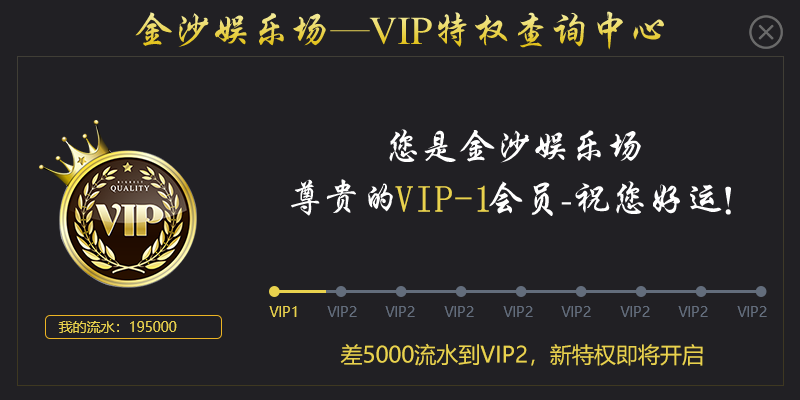
<style>
.page{position:relative;width:800px;height:400px;background:#212024}
.page>*{position:absolute;margin:0}
.t1{font:39.3px "CTXingKaiSJ"}
.t2{font:37.3px "CTXingKaiSJ";color:#ffffff}
.t3{font:37.3px "SimSun";color:#e9d24e;font-weight:bold}
.t4{font:14px "MicrosoftYaHei";color:#e9d24e}
.t5{font:14px "MicrosoftYaHei";color:#636d7c}
.t6{font:22px "MicrosoftYaHei";color:#e9d24e}
</style>
<div class="page">
<p class="t1" style="left:135px;top:11px;width:529px;height:39px">金沙娱乐场—VIP特权查询中心</p>
<p class="t2" style="left:389px;top:129px;width:252px;height:34px">您是金沙娱乐场</p>
<p class="t2" style="left:291px;top:179px;width:102px;height:37px">尊贵的</p>
<p class="t3" style="left:395px;top:185px;width:94px;height:27px">VIP-1</p>
<p class="t2" style="left:489px;top:181px;width:242px;height:35px">会员-祝您好运！</p>
<p class="t4" style="left:269px;top:306px;width:28px;height:11px">VIP1</p>
<p class="t5" style="left:327px;top:306px;width:30px;height:11px">VIP2</p>
<p class="t5" style="left:385px;top:306px;width:30px;height:11px">VIP2</p>
<p class="t5" style="left:444px;top:306px;width:30px;height:11px">VIP2</p>
<p class="t5" style="left:503px;top:306px;width:30px;height:11px">VIP2</p>
<p class="t5" style="left:561px;top:306px;width:30px;height:11px">VIP2</p>
<p class="t5" style="left:620px;top:306px;width:30px;height:11px">VIP2</p>
<p class="t5" style="left:678px;top:306px;width:30px;height:11px">VIP2</p>
<p class="t5" style="left:737px;top:306px;width:30px;height:11px">VIP2</p>
<p class="t4" style="left:58px;top:321px;width:119px;height:12px">我的流水：195000</p>
<p class="t6" style="left:340px;top:343px;width:363px;height:23px">差5000流水到VIP2，新特权即将开启</p>
</div>
